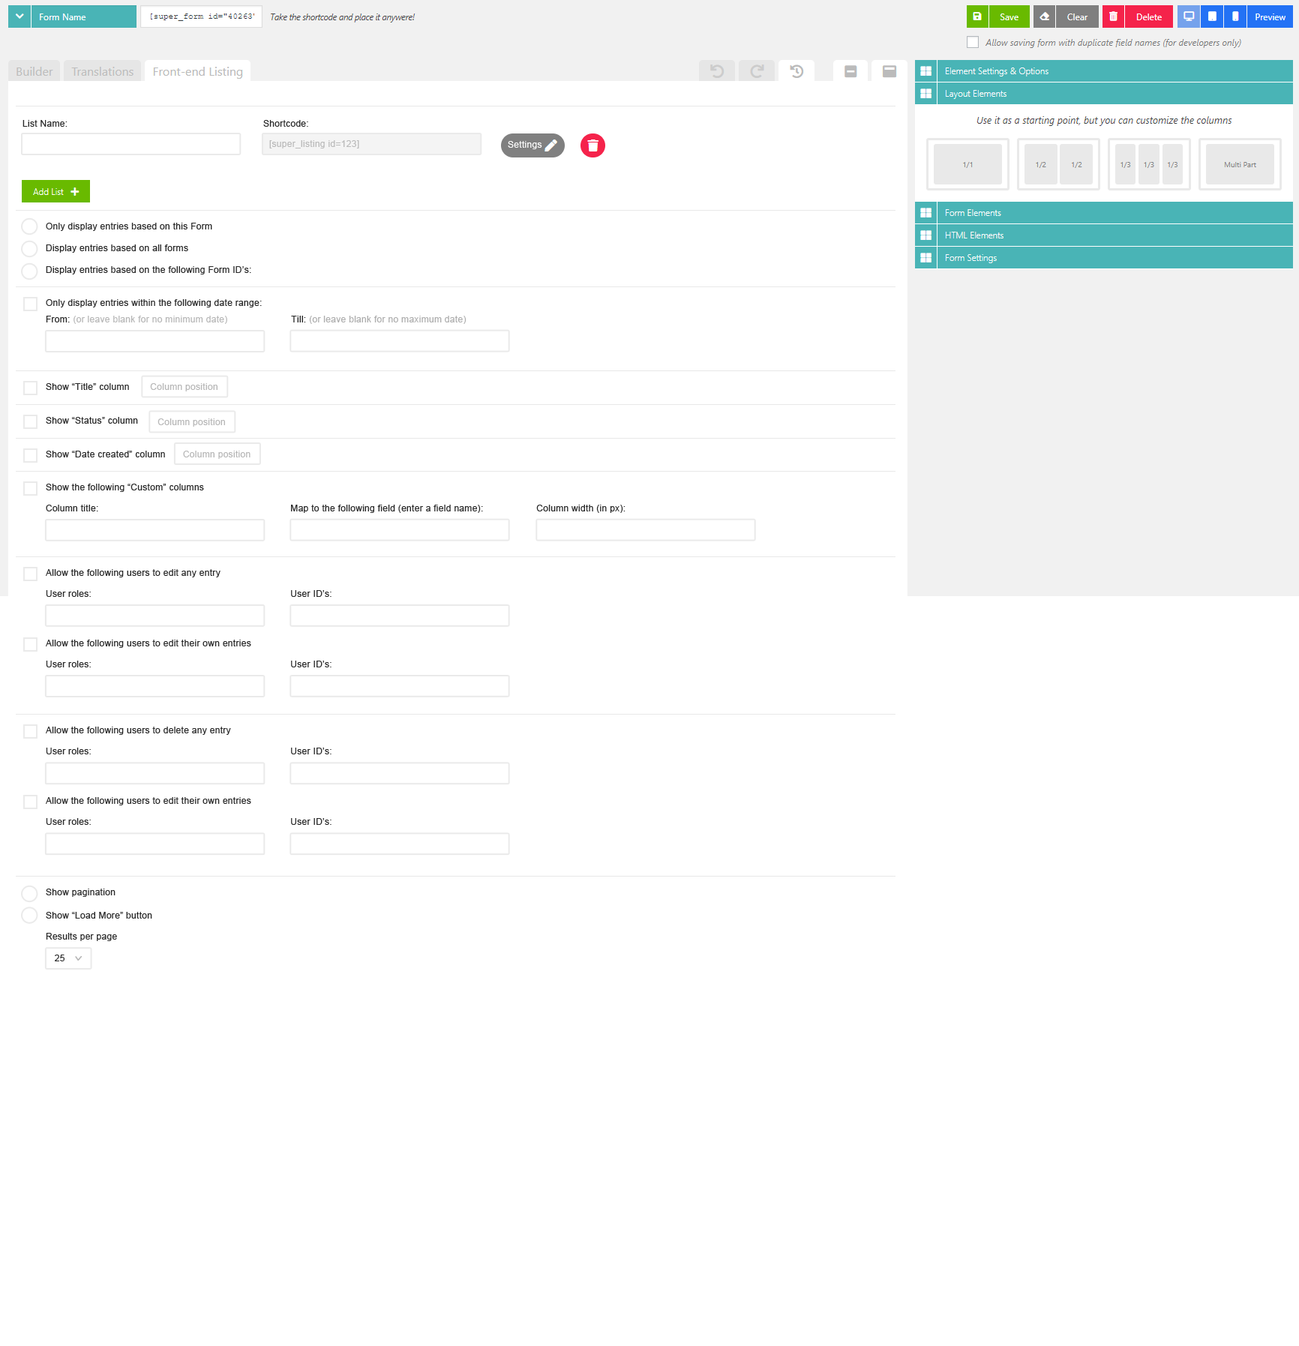
<style>
.page{position:relative;width:1299px;height:1346px;background:#ffffff}
.page>*{position:absolute;margin:0}
.t1{font:9px "ArialMT";letter-spacing:0.025em;color:#292929}
.t2{font:9px "ArialMT";letter-spacing:0.025em;color:#bbbbbb}
.t3{font:9px "ArialMT";letter-spacing:0.025em;color:#ffffff}
.t4{font:9px "ArialMT";letter-spacing:0.025em;color:#b7b7b7}
.t5{font:9px "ArialMT";letter-spacing:0.025em;color:#aeaeae}
</style>
<div class="page">
<p class="t1" style="left:23px;top:120px;width:45px;height:7px">List Name:</p>
<p class="t1" style="left:263px;top:120px;width:45px;height:7px">Shortcode:</p>
<p class="t2" style="left:269px;top:140px;width:90px;height:9px">[super_listing id=123]</p>
<p class="t3" style="left:508px;top:141px;width:34px;height:8px">Settings</p>
<p class="t1" style="left:46px;top:223px;width:166px;height:8px">Only display entries based on this Form</p>
<p class="t1" style="left:46px;top:245px;width:142px;height:8px">Display entries based on all forms</p>
<p class="t1" style="left:46px;top:266px;width:205px;height:9px">Display entries based on the following Form ID’s:</p>
<p class="t1" style="left:46px;top:299px;width:216px;height:9px">Only display entries within the following date range:</p>
<p class="t4" style="left:46px;top:316px;width:181px;height:8px"><span class="t1">From: </span>(or leave blank for no minimum date)</p>
<p class="t5" style="left:291px;top:316px;width:176px;height:8px"><span class="t1">Till: </span>(or leave blank for no maximum date)</p>
<p class="t1" style="left:46px;top:383px;width:83px;height:7px">Show “Title” column</p>
<p class="t4" style="left:150px;top:383px;width:68px;height:9px">Column position</p>
<p class="t1" style="left:46px;top:417px;width:92px;height:7px">Show “Status” column</p>
<p class="t4" style="left:158px;top:419px;width:67px;height:8px">Column position</p>
<p class="t1" style="left:46px;top:451px;width:119px;height:7px">Show “Date created” column</p>
<p class="t4" style="left:183px;top:451px;width:68px;height:8px">Column position</p>
<p class="t1" style="left:46px;top:484px;width:158px;height:8px">Show the following “Custom” columns</p>
<p class="t1" style="left:46px;top:505px;width:52px;height:7px">Column title:</p>
<p class="t1" style="left:291px;top:505px;width:192px;height:8px">Map to the following field (enter a field name):</p>
<p class="t1" style="left:536px;top:505px;width:90px;height:8px">Column width (in px):</p>
<p class="t1" style="left:46px;top:569px;width:175px;height:9px">Allow the following users to edit any entry</p>
<p class="t1" style="left:46px;top:590px;width:45px;height:7px">User roles:</p>
<p class="t1" style="left:291px;top:590px;width:41px;height:7px">User ID’s:</p>
<p class="t1" style="left:46px;top:640px;width:205px;height:8px">Allow the following users to edit their own entries</p>
<p class="t1" style="left:46px;top:661px;width:45px;height:7px">User roles:</p>
<p class="t1" style="left:291px;top:661px;width:41px;height:7px">User ID’s:</p>
<p class="t1" style="left:46px;top:727px;width:185px;height:8px">Allow the following users to delete any entry</p>
<p class="t1" style="left:46px;top:748px;width:45px;height:7px">User roles:</p>
<p class="t1" style="left:291px;top:748px;width:41px;height:7px">User ID’s:</p>
<p class="t1" style="left:46px;top:797px;width:205px;height:9px">Allow the following users to edit their own entries</p>
<p class="t1" style="left:46px;top:818px;width:45px;height:7px">User roles:</p>
<p class="t1" style="left:291px;top:818px;width:41px;height:7px">User ID’s:</p>
<p class="t1" style="left:46px;top:889px;width:70px;height:8px">Show pagination</p>
<p class="t1" style="left:46px;top:912px;width:106px;height:7px">Show “Load More” button</p>
<p class="t1" style="left:46px;top:933px;width:71px;height:8px">Results per page</p>
<p class="t1" style="left:55px;top:955px;width:10px;height:7px">25</p>
</div>
